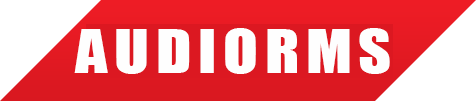
<style>
.page{position:relative;width:476px;height:101px;background:#ffffff}
.page>*{position:absolute;margin:0}
.t1{font:56px "Impact";letter-spacing:0.1em;color:#fefefe;scale:1.15 1}
</style>
<div class="page">
<p class="t1" style="left:74px;top:28px;width:316px;height:46px">AUDIORMS</p>
</div>
